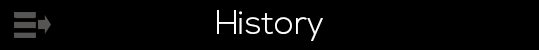
<style>
.page{position:relative;width:539px;height:50px;background:#000000}
.page>*{position:absolute;margin:0}
.t1{font:33.1px "NexaLight";color:#ffffff}
</style>
<div class="page">
<p class="t1" style="left:217px;top:10px;width:106px;height:31px">History</p>
</div>
